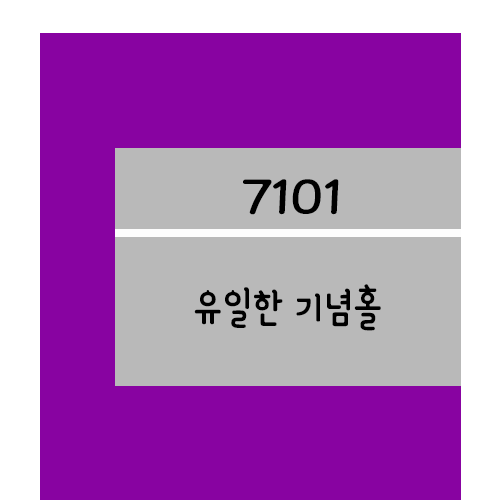
<style>
.page{position:relative;width:500px;height:500px;background:#8803a1}
.page>*{position:absolute;margin:0}
.t1{font:61.2px "YanoljaYacheR";color:#000000;scale:1.18 1}
.t2{font:48px "YanoljaYacheR";color:#000000}
</style>
<div class="page">
<p class="t1" style="left:243px;top:179px;width:96px;height:36px">7101</p>
<p class="t2" style="left:194px;top:284px;width:187px;height:47px">유일한 기념홀</p>
</div>
